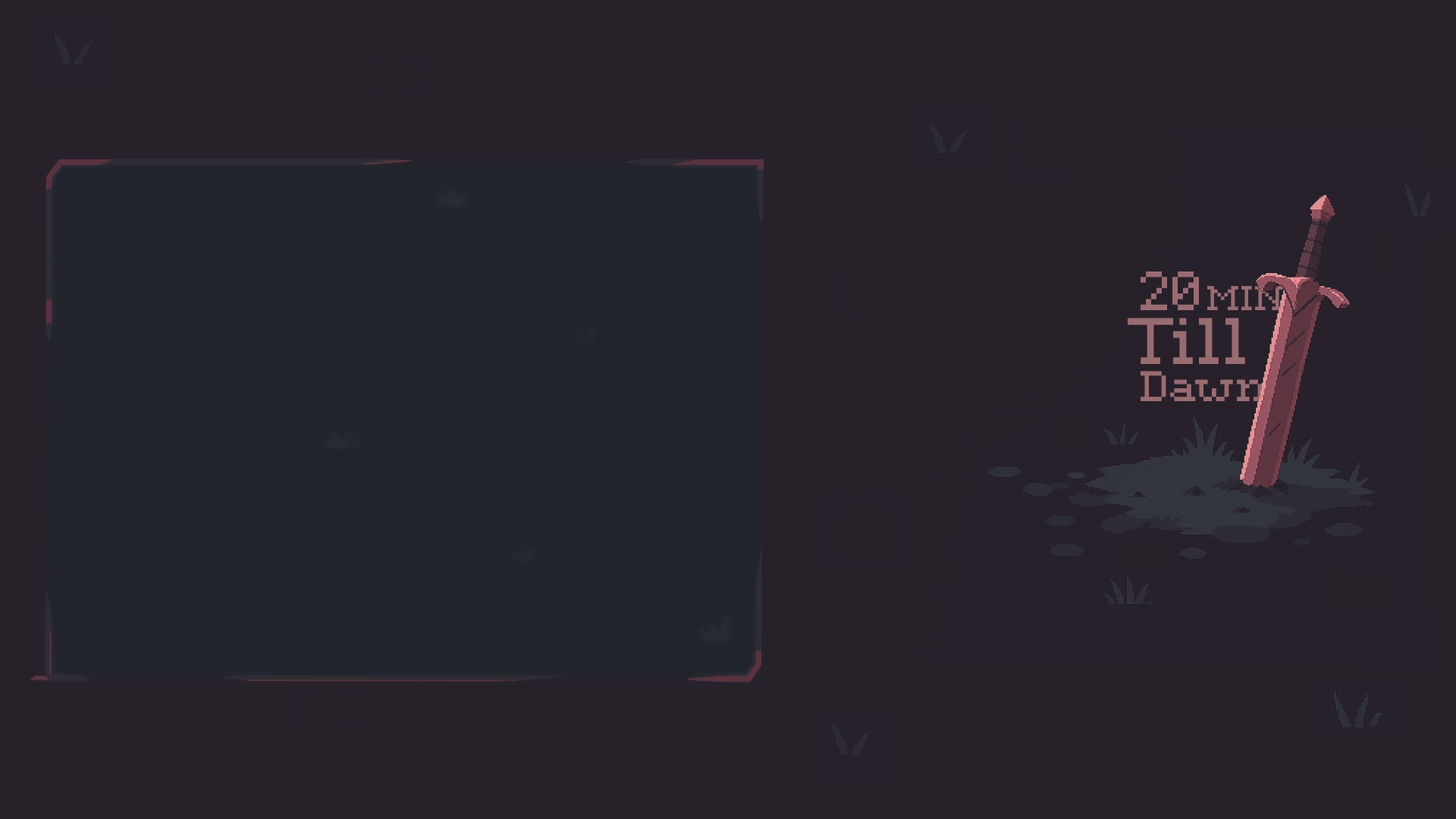
<style>
.page{position:relative;width:1456px;height:819px;background:#27212a}
.page>*{position:absolute;margin:0}
.t1{font:49.8px "ChevyRay---Express";color:#995462;scale:0.96 1}
.t2{font:30.9px "ChevyRay---Express";color:#995462}
.t3{font:58.9px "ChevyRay---Express";color:#995462}
.t4{font:38.4px "ChevyRay---Express";color:#995462}
</style>
<div class="page">
<p class="t1" style="left:1141px;top:271px;width:58px;height:39px">20</p>
<p class="t2" style="left:1207px;top:286px;width:76px;height:24px">MIN</p>
<p class="t3" style="left:1128px;top:318px;width:117px;height:46px">Till</p>
<p class="t4" style="left:1141px;top:371px;width:125px;height:30px">Dawn</p>
</div>
